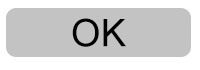
<style>
.page{position:relative;width:200px;height:70px;background:#c3c3c3}
.page>*{position:absolute;margin:0}
.t1{font:38px "ArialMT";color:#000000}
</style>
<div class="page">
<p class="t1" style="left:72px;top:18px;width:54px;height:29px">OK</p>
</div>
